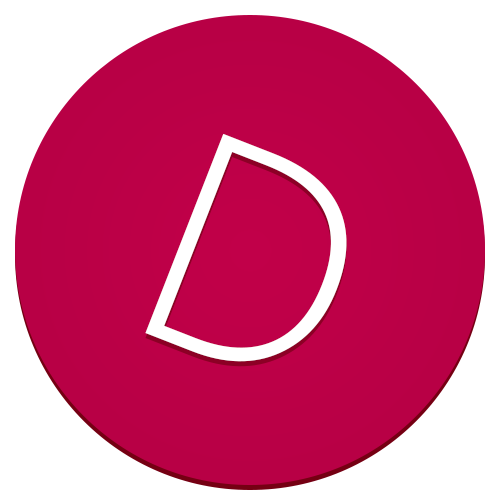
<style>
.page{position:relative;width:500px;height:500px;background:#ffffff}
.page>*{position:absolute;margin:0}
.t1{font:305.3px "SegoeUI-Light";color:#ffffff}
</style>
<div class="page">
<p class="t1" style="left:145px;top:133px;width:202px;height:229px;rotate:21deg">D</p>
</div>
